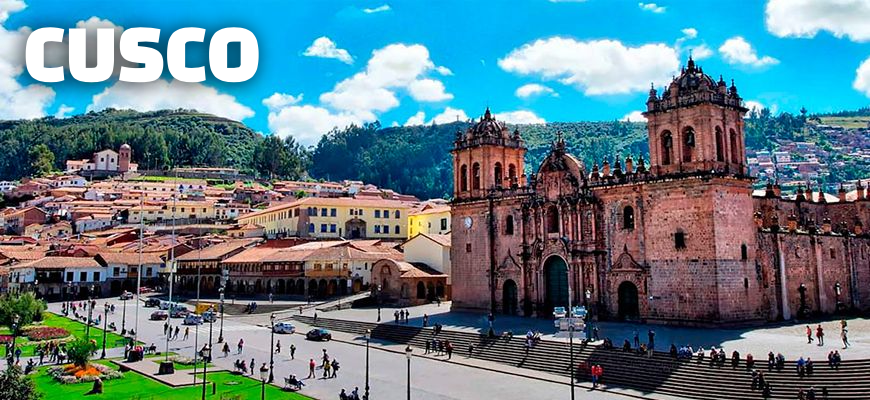
<style>
.page{position:relative;width:870px;height:400px}
.page>*{position:absolute;margin:0}
.t1{font:70px "BlackHanSans-Regular";color:#ffffff}
</style>
<div class="page">
<p class="t1" style="left:25px;top:27px;width:234px;height:56px">CUSCO</p>
</div>
